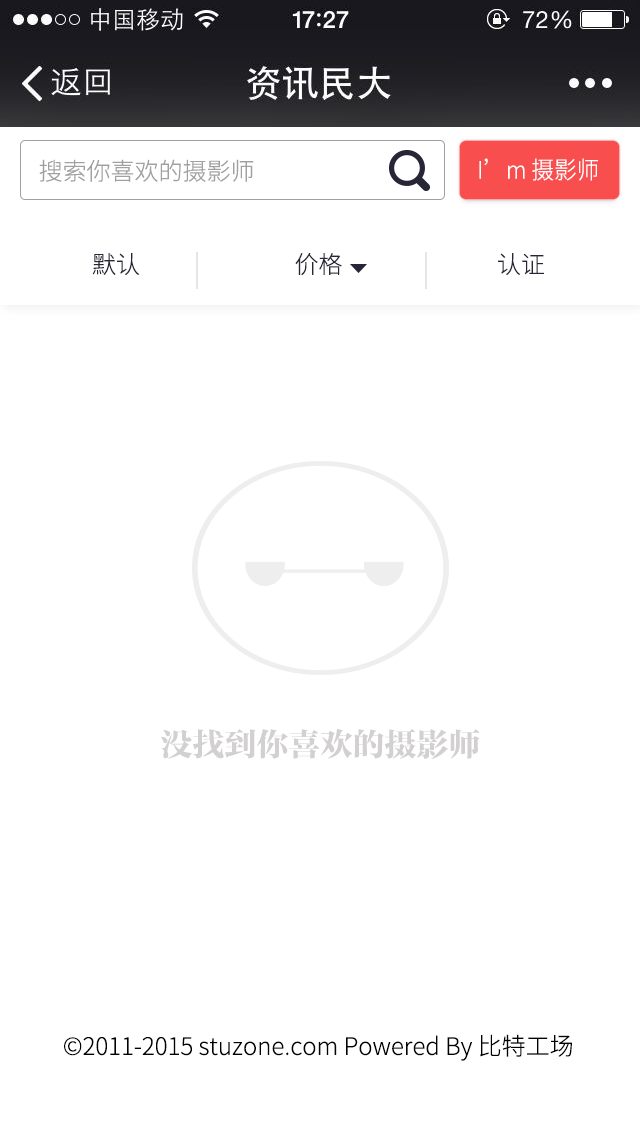
<style>
.page{position:relative;width:640px;height:1136px;background:#ffffff}
.page>*{position:absolute;margin:0}
.t1{font:24px "NotoSansHans-Light";color:#a0a0a0}
.t2{font:24px "NotoSansHans-Light";color:#ffffff;scale:0.94 1}
.t3{font:24px "NotoSansHans-Light";color:#272636}
.t4{font:32px "FZFYSJW--GB1-0";color:#d2d0d0}
.t5{font:24px "NotoSansHans-Light";color:#000000}
</style>
<div class="page">
<p class="t1" style="left:39px;top:159px;width:215px;height:23px">搜索你喜欢的摄影师</p>
<p class="t2" style="left:479px;top:158px;width:119px;height:23px">I’m 摄影师</p>
<p class="t3" style="left:92px;top:253px;width:452px;height:23px">默认                             价格                             认证</p>
<p class="t4" style="left:161px;top:728px;width:319px;height:31px">没找到你喜欢的摄影师</p>
<p class="t5" style="left:64px;top:1034px;width:508px;height:27px">©2011-2015 stuzone.com Powered By 比特工场</p>
</div>
